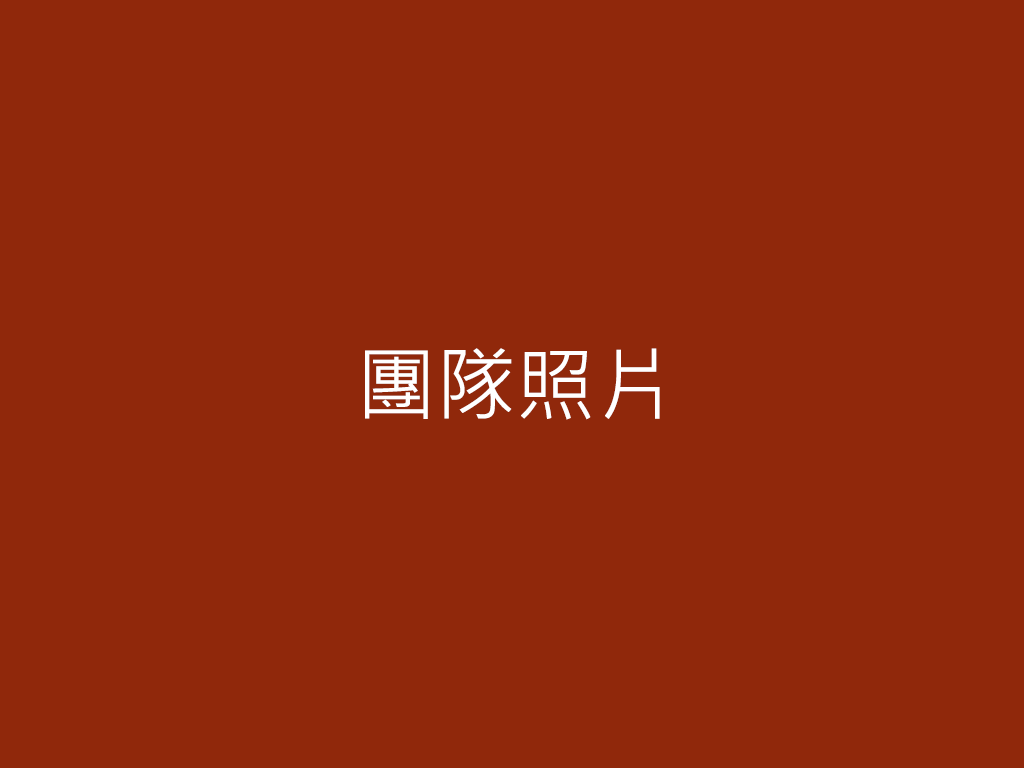
<style>
.page{position:relative;width:1024px;height:768px;background:#90280b}
.page>*{position:absolute;margin:0}
.t1{font:80px "MicrosoftJhengHeiRegular";color:#ffffff}
</style>
<div class="page">
<p class="t1" style="left:365px;top:348px;width:295px;height:72px">團隊照片</p>
</div>
